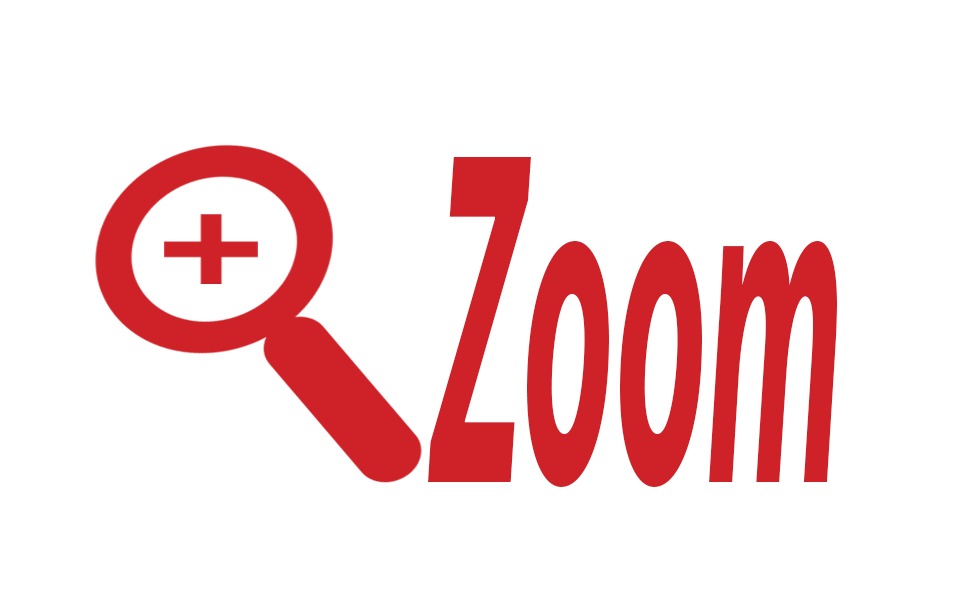
<style>
.page{position:relative;width:973px;height:615px;background:#ffffff}
.page>*{position:absolute;margin:0}
.t1{font:674.4px "MyriadArabic-BoldIt";color:#cf2228;scale:0.34 1}
</style>
<div class="page">
<p class="t1" style="left:428px;top:157px;width:409px;height:330px">Zoom</p>
</div>
